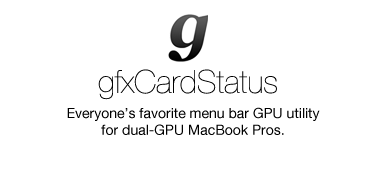
<style>
.page{position:relative;width:375px;height:175px;background:#ffffff}
.page>*{position:absolute;margin:0}
.t1{font:32px "HelveticaNeue-UltraLight";color:#000000}
.t2{font:14px "HelveticaNeue";color:#000000}
</style>
<div class="page">
<p class="t1" style="left:98px;top:69px;width:179px;height:31px">gfxCardStatus</p>
<p class="t2" style="left:67px;top:107px;width:253px;height:28px;text-align:center">Everyone’s favorite menu bar GPU utility<br>for dual-GPU MacBook Pros.</p>
</div>
